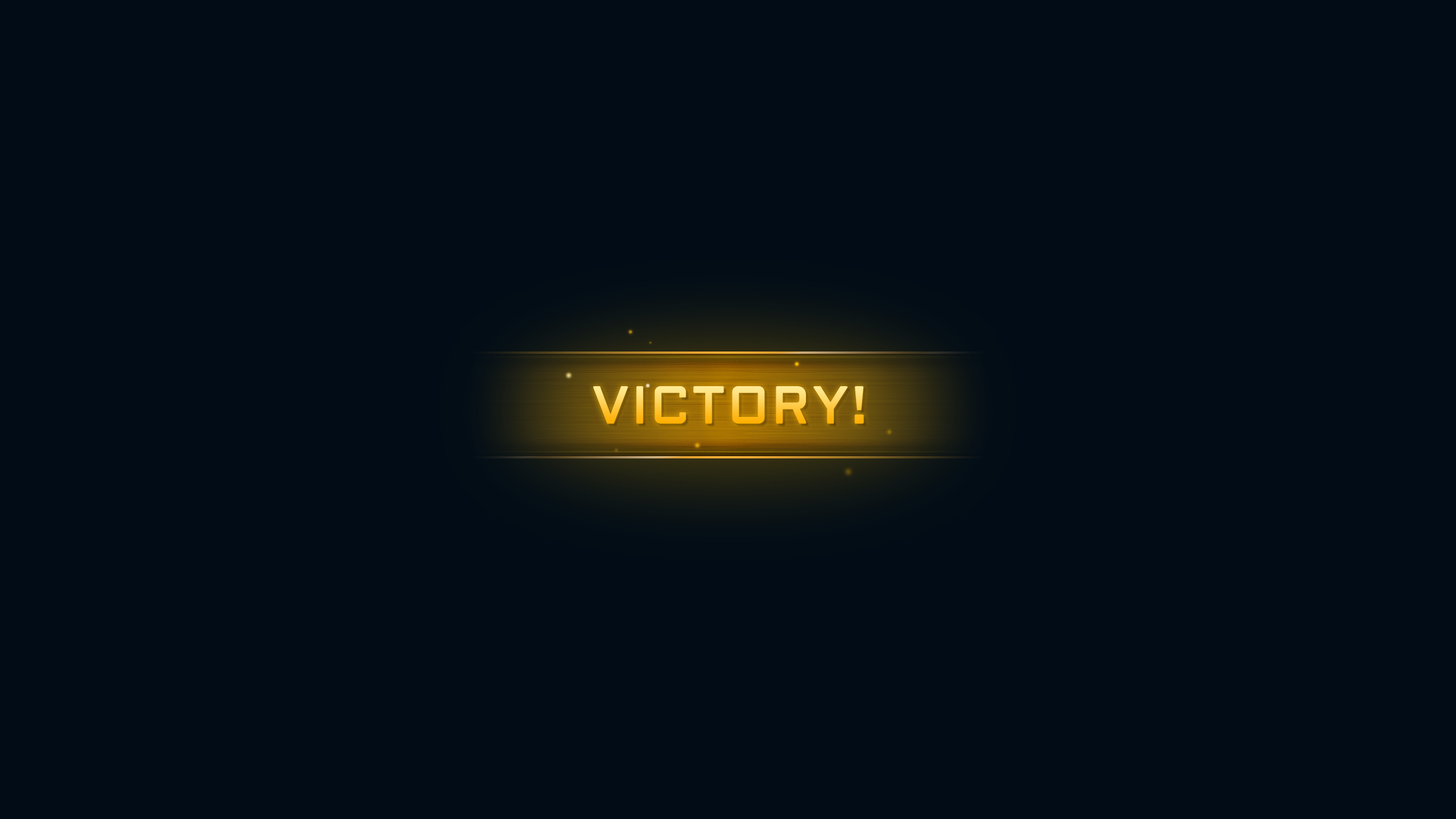
<style>
.page{position:relative;width:1456px;height:819px;background:#010c16}
.page>*{position:absolute;margin:0}
.t1{font:51.2px "Aldrich";letter-spacing:0.05em;font-weight:bold}
</style>
<div class="page">
<p class="t1" style="left:593px;top:386px;width:271px;height:38px">VICTORY!</p>
</div>
